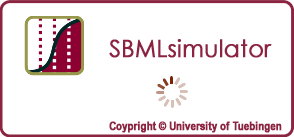
<style>
.page{position:relative;width:294px;height:137px;background:#ffffff}
.page>*{position:absolute;margin:0}
.t1{font:24px "CenturyGothic";color:#8b2440;font-weight:bold;scale:0.95 1}
.t2{font:12px "ArialNarrow-Bold";color:#8b2440;font-weight:bold;scale:0.95 1}
</style>
<div class="page">
<p class="t1" style="left:109px;top:39px;width:163px;height:19px">SBMLsimulator</p>
<p class="t2" style="left:109px;top:121px;width:173px;height:12px">Coypright © University of Tuebingen</p>
</div>
